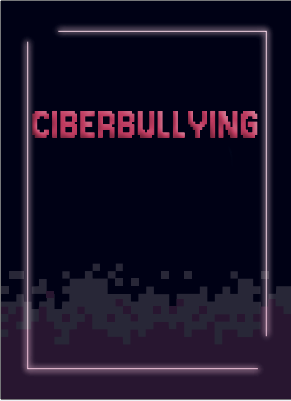
<style>
.page{position:relative;width:291px;height:401px;background:#000115}
.page>*{position:absolute;margin:0}
.t1{font:50px "Jersey10-Regular";letter-spacing:0.025em;scale:0.87 1}
</style>
<div class="page">
<p class="t1" style="left:32px;top:110px;width:226px;height:28px">CIBERBULLYING</p>
</div>
